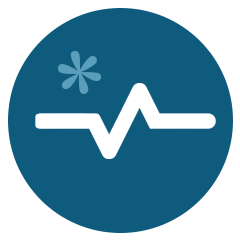
<style>
.page{position:relative;width:240px;height:240px;background:#0e5b7d}
.page>*{position:absolute;margin:0}
.t1{font:140px "SnellRoundhand-Bold";color:#5a9ebc}
</style>
<div class="page">
<p class="t1" style="left:57px;top:51px;width:45px;height:43px">*</p>
</div>
